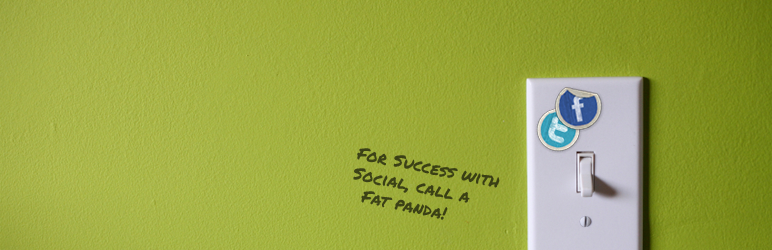
<style>
.page{position:relative;width:772px;height:250px}
.page>*{position:absolute;margin:0}
.t1{font:17.4px "PermanentMarker";color:#3b4115}
</style>
<div class="page">
<p class="t1" style="left:353px;top:148px;width:147px;height:72px;rotate:11deg">For Success with<br>Social, call a <br>  Fat panda!</p>
</div>
